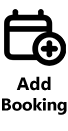
<style>
.page{position:relative;width:68px;height:131px;background:#ffffff}
.page>*{position:absolute;margin:0}
.t1{font:17px "MicrosoftTaiLe-Bold";color:#000000}
.t2{font:18px "MicrosoftTaiLe-Bold";color:#000000}
</style>
<div class="page">
<p class="t1" style="left:2px;top:76px;width:65px;height:39px;text-align:center"><span class="t2">Add<br></span>Booking</p>
</div>
